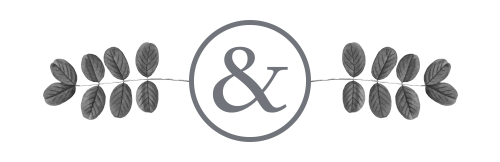
<style>
.page{position:relative;width:500px;height:162px;background:#ffffff}
.page>*{position:absolute;margin:0}
.t1{font:101.4px "SanskritText";color:#71747a}
</style>
<div class="page">
<p class="t1" style="left:212px;top:46px;width:76px;height:67px">&amp;</p>
</div>
